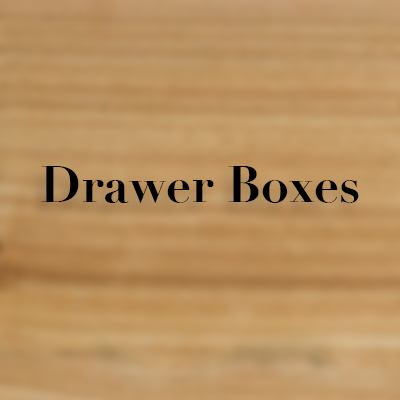
<style>
.page{position:relative;width:400px;height:400px}
.page>*{position:absolute;margin:0}
.t1{font:50px "Didot-Bold";color:#000000}
</style>
<div class="page">
<p class="t1" style="left:41px;top:166px;width:318px;height:37px">Drawer Boxes</p>
</div>
